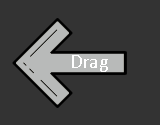
<style>
.page{position:relative;width:160px;height:125px;background:#333333}
.page>*{position:absolute;margin:0}
.t1{font:20px "Calibri";color:#ffffff}
</style>
<div class="page">
<p class="t1" style="left:72px;top:55px;width:36px;height:17px">Drag</p>
</div>
